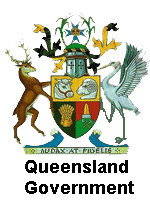
<style>
.page{position:relative;width:150px;height:200px;background:#ffffff}
.page>*{position:absolute;margin:0}
.t1{font:17.9px "Arial-BoldMT";color:#000000}
</style>
<div class="page">
<p class="t1" style="left:25px;top:160px;width:109px;height:34px">Queensland<br>Government</p>
</div>
